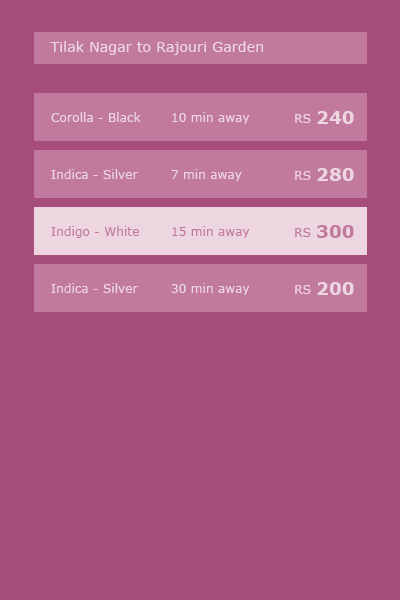
<style>
.page{position:relative;width:400px;height:600px;background:#a64d79}
.page>*{position:absolute;margin:0}
.t1{font:14px "Verdana";letter-spacing:0.01em;color:#edd6e0}
.t2{font:12px "Verdana";letter-spacing:0.01em;color:#edd6e0}
.t3{font:18px "Verdana-Bold";letter-spacing:0.01em;color:#edd6e0}
.t4{font:12px "Verdana";letter-spacing:0.01em;color:#c1799e}
.t5{font:18px "Verdana-Bold";letter-spacing:0.01em;color:#c1799e}
</style>
<div class="page">
<p class="t1" style="left:50px;top:41px;width:213px;height:14px">Tilak Nagar to Rajouri Garden</p>
<p class="t2" style="left:51px;top:112px;width:90px;height:10px">Corolla - Black</p>
<p class="t2" style="left:172px;top:112px;width:78px;height:12px">10 min away</p>
<p class="t3" style="left:317px;top:111px;width:37px;height:13px">240</p>
<p class="t2" style="left:295px;top:114px;width:16px;height:9px">RS</p>
<p class="t2" style="left:51px;top:169px;width:87px;height:10px">Indica - Silver</p>
<p class="t2" style="left:171px;top:169px;width:71px;height:12px">7 min away</p>
<p class="t2" style="left:295px;top:171px;width:16px;height:9px">RS</p>
<p class="t3" style="left:317px;top:168px;width:37px;height:13px">280</p>
<p class="t4" style="left:51px;top:226px;width:88px;height:12px">Indigo - White</p>
<p class="t4" style="left:172px;top:226px;width:78px;height:12px">15 min away</p>
<p class="t4" style="left:295px;top:228px;width:16px;height:9px">RS</p>
<p class="t5" style="left:317px;top:225px;width:37px;height:13px">300</p>
<p class="t2" style="left:51px;top:283px;width:87px;height:10px">Indica - Silver</p>
<p class="t2" style="left:171px;top:283px;width:79px;height:12px">30 min away</p>
<p class="t2" style="left:295px;top:285px;width:16px;height:9px">RS</p>
<p class="t3" style="left:317px;top:282px;width:37px;height:13px">200</p>
</div>
